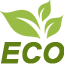
<style>
.page{position:relative;width:64px;height:64px;background:#ffffff}
.page>*{position:absolute;margin:0}
.t1{font:28.7px "Arial-BoldItalicMT";color:#608014;font-weight:bold}
</style>
<div class="page">
<p class="t1" style="left:1px;top:42px;width:64px;height:22px">ECO</p>
</div>
